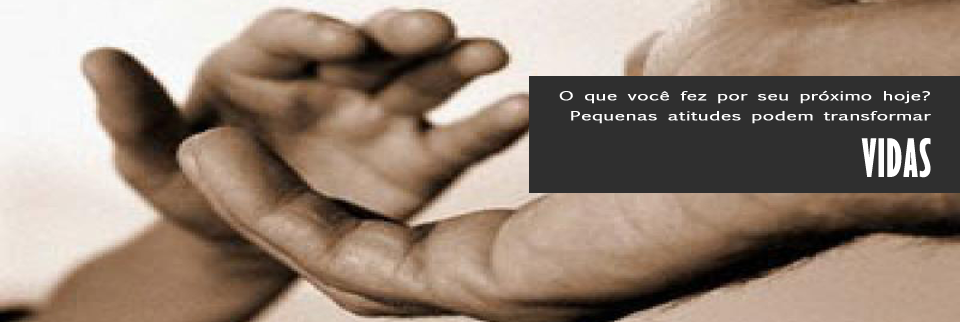
<style>
.page{position:relative;width:960px;height:322px}
.page>*{position:absolute;margin:0}
.t1{font:12px/20px "EuphemiaCAS";color:#ffffff;font-weight:bold;scale:1.57 1}
.t2{font:48px "GillSansMT-ExtraCondensedBold";color:#ffffff;text-transform:uppercase;font-weight:bold}
</style>
<div class="page">
<p class="t1" style="left:559px;top:90px;width:372px;height:34px;text-align:right">O que você fez por seu próximo hoje?<br>Pequenas atitudes podem transformar</p>
<p class="t2" style="left:861px;top:138px;width:70px;height:40px">Vidas</p>
</div>
